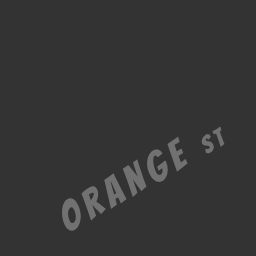
<style>
.page{position:relative;width:256px;height:256px;background:#333333}
.page>*{position:absolute;margin:0}
.t1{font:40px "Bangers-Regular";letter-spacing:0.16em;color:#717171}
.t2{font:24px "Bangers-Regular";letter-spacing:0.16em;color:#717171}
</style>
<div class="page">
<p class="t1" style="left:62px;top:126px;width:163px;height:105px;rotate:-30deg">ORANGE <span class="t2">ST</span></p>
</div>
